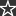
<style>
.page{position:relative;width:16px;height:16px;background:#333333}
.page>*{position:absolute;margin:0}
.t1{font:21.2px "RixJGoL";color:#ffffff}
</style>
<div class="page">
<p class="t1" style="left:0px;top:0px;width:18px;height:17px">☆</p>
</div>
